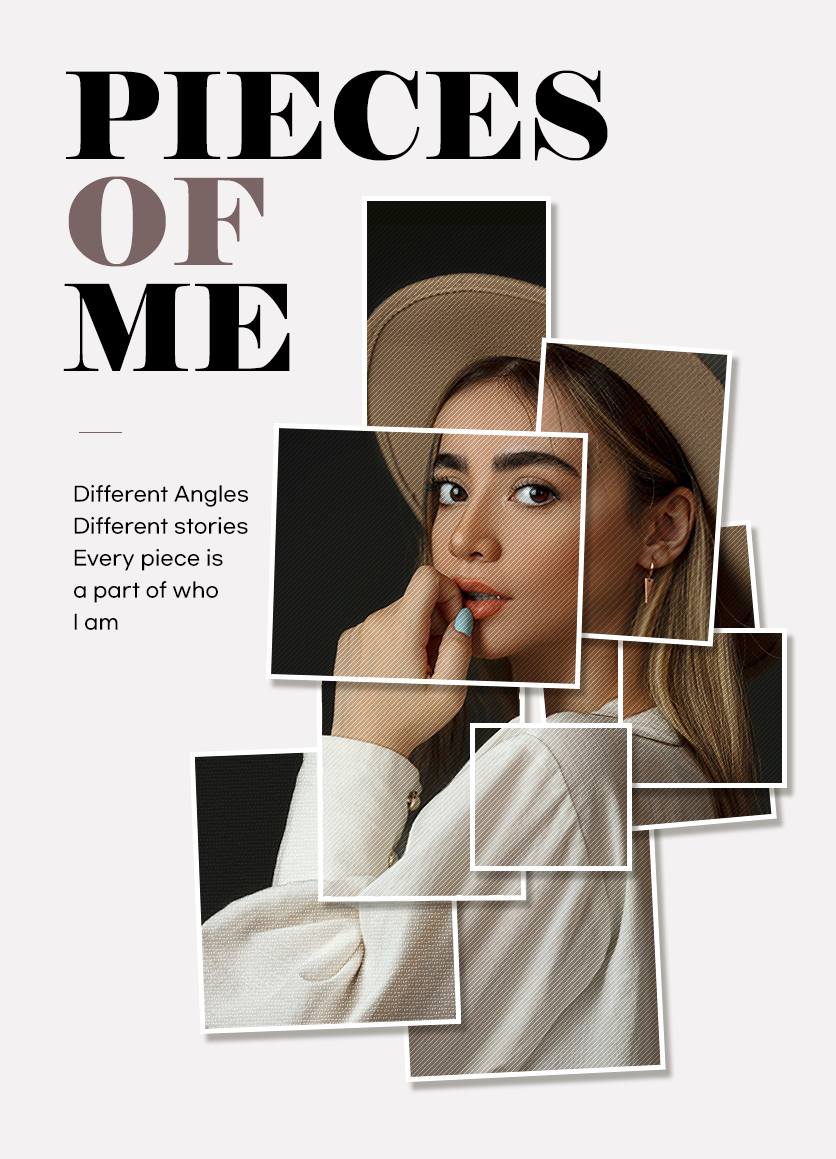
<style>
.page{position:relative;width:836px;height:1159px;background:#f3f1f1}
.page>*{position:absolute;margin:0}
.t1{font:119.7px/106px "Elephant-Regular";color:#000000;text-transform:uppercase}
.t2{font:119.7px/106px "Elephant-Regular";color:#7a6464;text-transform:uppercase}
.t3{font:20px/32px "GmarketSansMedium";color:#000000}
</style>
<div class="page">
<p class="t1" style="left:63px;top:70px;width:545px;height:301px">PIECES<br><span class="t2">OF<br></span>ME</p>
<p class="t3" style="left:74px;top:485px;width:175px;height:145px">Different Angles<br>Different stories<br>Every piece is <br>a part of who <br>I am</p>
</div>
